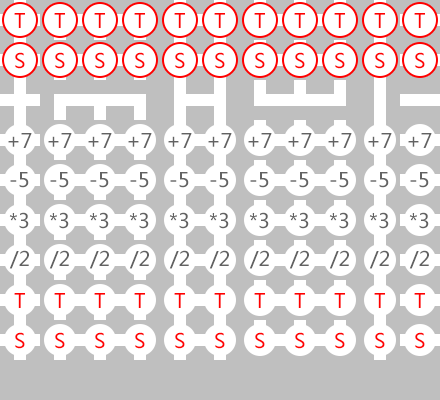
<style>
.page{position:relative;width:440px;height:400px;background:#bfbfbf}
.page>*{position:absolute;margin:0}
.t1{font:20px "MicrosoftYaHei";color:#ff0000}
.t2{font:20px "MicrosoftYaHei";color:#626262}
</style>
<div class="page">
<p class="t1" style="left:14px;top:13px;width:11px;height:15px">T</p>
<p class="t1" style="left:54px;top:13px;width:11px;height:15px">T</p>
<p class="t1" style="left:94px;top:13px;width:11px;height:15px">T</p>
<p class="t1" style="left:134px;top:13px;width:11px;height:15px">T</p>
<p class="t1" style="left:174px;top:13px;width:11px;height:15px">T</p>
<p class="t1" style="left:214px;top:13px;width:11px;height:15px">T</p>
<p class="t1" style="left:254px;top:13px;width:11px;height:15px">T</p>
<p class="t1" style="left:294px;top:13px;width:11px;height:15px">T</p>
<p class="t1" style="left:334px;top:13px;width:11px;height:15px">T</p>
<p class="t1" style="left:374px;top:13px;width:11px;height:15px">T</p>
<p class="t1" style="left:414px;top:13px;width:11px;height:15px">T</p>
<p class="t1" style="left:15px;top:52px;width:10px;height:17px">S</p>
<p class="t1" style="left:55px;top:52px;width:10px;height:17px">S</p>
<p class="t1" style="left:95px;top:52px;width:10px;height:17px">S</p>
<p class="t1" style="left:135px;top:52px;width:10px;height:17px">S</p>
<p class="t1" style="left:175px;top:52px;width:10px;height:17px">S</p>
<p class="t1" style="left:215px;top:52px;width:10px;height:17px">S</p>
<p class="t1" style="left:255px;top:52px;width:10px;height:17px">S</p>
<p class="t1" style="left:295px;top:52px;width:10px;height:17px">S</p>
<p class="t1" style="left:335px;top:52px;width:10px;height:17px">S</p>
<p class="t1" style="left:375px;top:52px;width:10px;height:17px">S</p>
<p class="t1" style="left:415px;top:52px;width:10px;height:17px">S</p>
<p class="t2" style="left:8px;top:133px;width:24px;height:15px">+7</p>
<p class="t2" style="left:48px;top:133px;width:24px;height:15px">+7</p>
<p class="t2" style="left:88px;top:133px;width:24px;height:15px">+7</p>
<p class="t2" style="left:128px;top:133px;width:24px;height:15px">+7</p>
<p class="t2" style="left:168px;top:133px;width:24px;height:15px">+7</p>
<p class="t2" style="left:208px;top:133px;width:24px;height:15px">+7</p>
<p class="t2" style="left:248px;top:133px;width:24px;height:15px">+7</p>
<p class="t2" style="left:288px;top:133px;width:24px;height:15px">+7</p>
<p class="t2" style="left:328px;top:133px;width:24px;height:15px">+7</p>
<p class="t2" style="left:368px;top:133px;width:24px;height:15px">+7</p>
<p class="t2" style="left:408px;top:133px;width:24px;height:15px">+7</p>
<p class="t2" style="left:10px;top:172px;width:19px;height:16px">-5</p>
<p class="t2" style="left:50px;top:172px;width:19px;height:16px">-5</p>
<p class="t2" style="left:90px;top:172px;width:19px;height:16px">-5</p>
<p class="t2" style="left:130px;top:172px;width:19px;height:16px">-5</p>
<p class="t2" style="left:170px;top:172px;width:19px;height:16px">-5</p>
<p class="t2" style="left:210px;top:172px;width:19px;height:16px">-5</p>
<p class="t2" style="left:250px;top:172px;width:19px;height:16px">-5</p>
<p class="t2" style="left:290px;top:172px;width:19px;height:16px">-5</p>
<p class="t2" style="left:330px;top:172px;width:19px;height:16px">-5</p>
<p class="t2" style="left:370px;top:172px;width:19px;height:16px">-5</p>
<p class="t2" style="left:410px;top:172px;width:19px;height:16px">-5</p>
<p class="t2" style="left:9px;top:212px;width:20px;height:17px">*3</p>
<p class="t2" style="left:49px;top:212px;width:20px;height:17px">*3</p>
<p class="t2" style="left:89px;top:212px;width:20px;height:17px">*3</p>
<p class="t2" style="left:129px;top:212px;width:20px;height:17px">*3</p>
<p class="t2" style="left:169px;top:212px;width:20px;height:17px">*3</p>
<p class="t2" style="left:209px;top:212px;width:20px;height:17px">*3</p>
<p class="t2" style="left:249px;top:212px;width:20px;height:17px">*3</p>
<p class="t2" style="left:289px;top:212px;width:20px;height:17px">*3</p>
<p class="t2" style="left:329px;top:212px;width:20px;height:17px">*3</p>
<p class="t2" style="left:369px;top:212px;width:20px;height:17px">*3</p>
<p class="t2" style="left:409px;top:212px;width:20px;height:17px">*3</p>
<p class="t2" style="left:9px;top:250px;width:20px;height:19px">/2</p>
<p class="t2" style="left:49px;top:250px;width:20px;height:19px">/2</p>
<p class="t2" style="left:89px;top:250px;width:20px;height:19px">/2</p>
<p class="t2" style="left:129px;top:250px;width:20px;height:19px">/2</p>
<p class="t2" style="left:169px;top:250px;width:20px;height:19px">/2</p>
<p class="t2" style="left:209px;top:250px;width:20px;height:19px">/2</p>
<p class="t2" style="left:249px;top:250px;width:20px;height:19px">/2</p>
<p class="t2" style="left:289px;top:250px;width:20px;height:19px">/2</p>
<p class="t2" style="left:329px;top:250px;width:20px;height:19px">/2</p>
<p class="t2" style="left:369px;top:250px;width:20px;height:19px">/2</p>
<p class="t2" style="left:409px;top:250px;width:20px;height:19px">/2</p>
<p class="t1" style="left:14px;top:293px;width:11px;height:15px">T</p>
<p class="t1" style="left:54px;top:293px;width:11px;height:15px">T</p>
<p class="t1" style="left:94px;top:293px;width:11px;height:15px">T</p>
<p class="t1" style="left:134px;top:293px;width:11px;height:15px">T</p>
<p class="t1" style="left:174px;top:293px;width:11px;height:15px">T</p>
<p class="t1" style="left:214px;top:293px;width:11px;height:15px">T</p>
<p class="t1" style="left:254px;top:293px;width:11px;height:15px">T</p>
<p class="t1" style="left:294px;top:293px;width:11px;height:15px">T</p>
<p class="t1" style="left:334px;top:293px;width:11px;height:15px">T</p>
<p class="t1" style="left:374px;top:293px;width:11px;height:15px">T</p>
<p class="t1" style="left:414px;top:293px;width:11px;height:15px">T</p>
<p class="t1" style="left:15px;top:332px;width:10px;height:17px">S</p>
<p class="t1" style="left:55px;top:332px;width:10px;height:17px">S</p>
<p class="t1" style="left:95px;top:332px;width:10px;height:17px">S</p>
<p class="t1" style="left:135px;top:332px;width:10px;height:17px">S</p>
<p class="t1" style="left:175px;top:332px;width:10px;height:17px">S</p>
<p class="t1" style="left:215px;top:332px;width:10px;height:17px">S</p>
<p class="t1" style="left:255px;top:332px;width:10px;height:17px">S</p>
<p class="t1" style="left:295px;top:332px;width:10px;height:17px">S</p>
<p class="t1" style="left:335px;top:332px;width:10px;height:17px">S</p>
<p class="t1" style="left:375px;top:332px;width:10px;height:17px">S</p>
<p class="t1" style="left:415px;top:332px;width:10px;height:17px">S</p>
</div>
